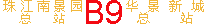
<style>
.page{position:relative;width:208px;height:24px;background:#ffffff}
.page>*{position:absolute;margin:0}
.t1{font:13px "MicrosoftYaHei";letter-spacing:0.28em;color:#f1b73b}
.t2{font:33px "ArialMT";letter-spacing:0.01em;color:#f30a12}
.t3{font:33px "ArialMT";letter-spacing:-0.01em;color:#f30a12}
.t4{font:13px "MicrosoftYaHei";letter-spacing:0.69em;color:#f1b73b}
.t5{font:12px "MicrosoftYaHei";letter-spacing:-0.13em;color:#f1b73b}
.t6{font:12px "MicrosoftYaHei";letter-spacing:0.05em;color:#f1b73b}
.t7{font:13px "MicrosoftYaHei";letter-spacing:-0.07em;color:#f1b73b}
.t8{font:13px "MicrosoftYaHei";letter-spacing:0.11em;color:#f1b73b}
</style>
<div class="page">
<p class="t1" style="left:3px;top:0px;width:79px;height:12px">珠江南景园</p>
<p class="t2" style="left:86px;top:0px;width:36px;height:24px">B<span class="t3">9</span></p>
<p class="t4" style="left:126px;top:0px;width:78px;height:12px">华景新城</p>
<p class="t5" style="left:19px;top:13px;width:46px;height:11px">总      <span class="t6">站</span></p>
<p class="t7" style="left:137px;top:12px;width:56px;height:12px">总      <span class="t8">站</span></p>
</div>
